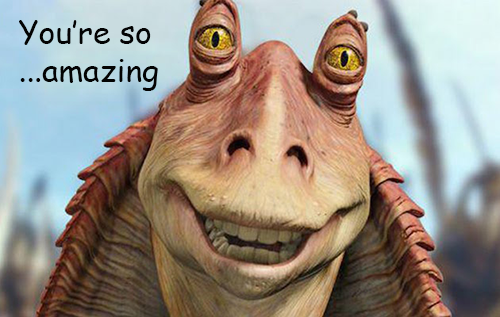
<style>
.page{position:relative;width:500px;height:317px}
.page>*{position:absolute;margin:0}
.t1{font:31.7px/19px "ComicSansMS";color:#030303}
</style>
<div class="page">
<p class="t1" style="left:19px;top:20px;width:139px;height:71px">You’re so<br><br>...amazing</p>
</div>
